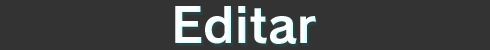
<style>
.page{position:relative;width:490px;height:50px;background:#333333}
.page>*{position:absolute;margin:0}
.t1{font:48px "RodinPro-B";color:#fffeff}
</style>
<div class="page">
<p class="t1" style="left:175px;top:6px;width:141px;height:38px">Editar</p>
</div>
